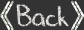
<style>
.page{position:relative;width:84px;height:30px;background:#333333}
.page>*{position:absolute;margin:0}
.t1{font:28px "DJBChalkItUp"}
</style>
<div class="page">
<p class="t1" style="left:16px;top:4px;width:53px;height:23px">Back</p>
</div>
